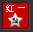
<style>
.page{position:relative;width:33px;height:32px;background:#c50000}
.page>*{position:absolute;margin:0}
.t1{font:10.4px "SimSun";color:#ffffff}
</style>
<div class="page">
<p class="t1" style="left:6px;top:5px;width:19px;height:7px">红一</p>
</div>
